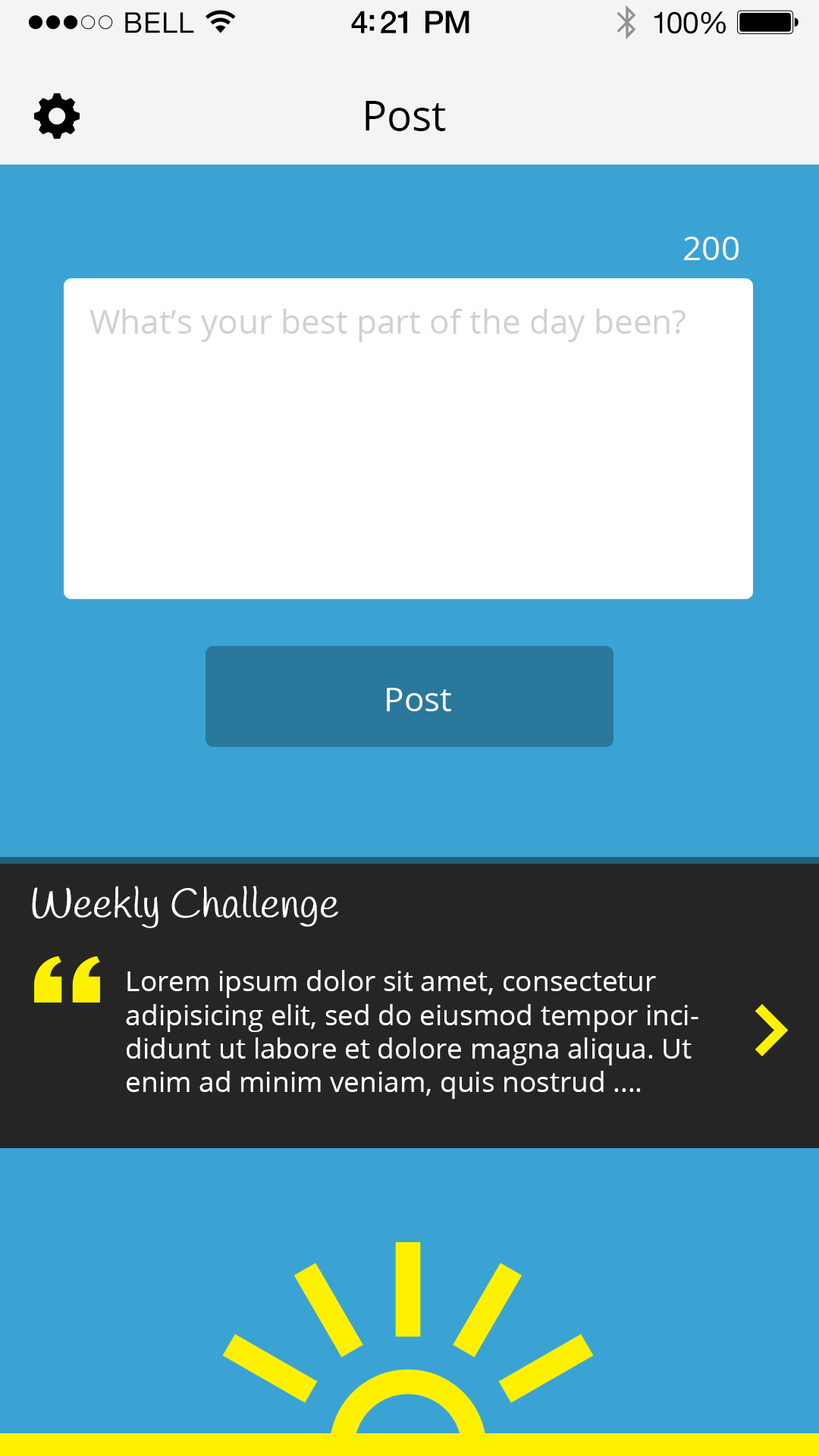
<style>
.page{position:relative;width:819px;height:1456px;background:#3ba3d4}
.page>*{position:absolute;margin:0}
.t1{font:28.7px "HelveticaNeue";letter-spacing:0.02em;color:#000000}
.t2{font:31.2px "HelveticaNeue-Medium";letter-spacing:-0.02em;color:#000000}
.t3{font:30px "HelveticaNeue";letter-spacing:-0.02em;color:#010101}
.t4{font:41.6px "OpenSans";color:#000000}
.t5{font:33.4px "OpenSans";color:#ffffff}
.t6{font:33.4px "OpenSans";color:#d0d0d0}
.t7{font:41.8px "Handlee-Regular";color:#ffffff}
.t8{font:28.1px "OpenSans";color:#ffffff}
</style>
<div class="page">
<p class="t1" style="left:125px;top:12px;width:69px;height:21px">BELL</p>
<p class="t2" style="left:351px;top:11px;width:118px;height:22px">4:21 PM</p>
<p class="t3" style="left:654px;top:11px;width:72px;height:23px">100%</p>
<p class="t4" style="left:366px;top:101px;width:80px;height:30px">Post</p>
<p class="t5" style="left:684px;top:237px;width:55px;height:23px">200</p>
<p class="t6" style="left:89px;top:309px;width:597px;height:33px">What’s your best part of the day been?</p>
<p class="t5" style="left:387px;top:688px;width:64px;height:23px">Post</p>
<p class="t7" style="left:32px;top:886px;width:306px;height:42px">Weekly Challenge</p>
<p class="t8" style="left:126px;top:970px;width:572px;height:129px">Lorem ipsum dolor sit amet, consectetur adipisicing elit, sed do eiusmod tempor incididunt ut labore et dolore magna aliqua. Ut enim ad minim veniam, quis nostrud ....</p>
</div>
